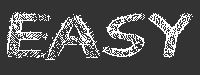
<style>
.page{position:relative;width:200px;height:75px;background:#333333}
.page>*{position:absolute;margin:0}
.t1{font:61.7px "Drawing-Guides";color:#ffffff;scale:1.63 1}
</style>
<div class="page">
<p class="t1" style="left:7px;top:12px;width:186px;height:48px">EASY</p>
</div>
